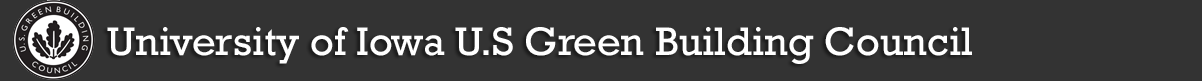
<style>
.page{position:relative;width:1202px;height:81px;background:#333333}
.page>*{position:absolute;margin:0}
.t1{font:40.5px "Rockwell";color:#ffffff}
</style>
<div class="page">
<p class="t1" style="left:107px;top:27px;width:865px;height:37px">University of Iowa U.S Green Building Council</p>
</div>
